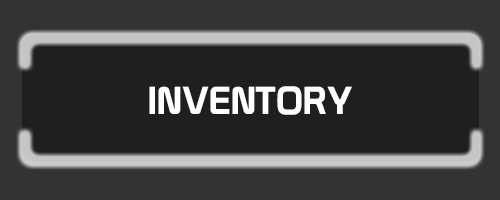
<style>
.page{position:relative;width:500px;height:200px;background:#1f1f1f}
.page>*{position:absolute;margin:0}
.t1{font:38px "Prototype";color:#ffffff}
</style>
<div class="page">
<p class="t1" style="left:149px;top:86px;width:203px;height:29px">INVENTORY</p>
</div>
